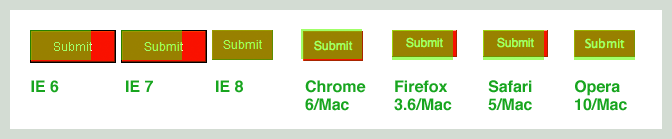
<style>
.page{position:relative;width:672px;height:139px;background:#ffffff}
.page>*{position:absolute;margin:0}
.t1{font:16px "Helvetica-Bold";color:#18a51f}
.t2{font:16px/18px "Helvetica-Bold";color:#18a51f}
</style>
<div class="page">
<p class="t1" style="left:31px;top:80px;width:28px;height:13px">IE 6</p>
<p class="t1" style="left:126px;top:80px;width:27px;height:12px">IE 7</p>
<p class="t1" style="left:216px;top:80px;width:27px;height:13px">IE 8</p>
<p class="t2" style="left:305px;top:80px;width:61px;height:31px">Chrome <br>6/Mac</p>
<p class="t2" style="left:394px;top:80px;width:58px;height:31px">Firefox<br>3.6/Mac</p>
<p class="t2" style="left:488px;top:80px;width:44px;height:31px">Safari <br>5/Mac</p>
<p class="t2" style="left:575px;top:80px;width:52px;height:31px">Opera<br>10/Mac</p>
</div>
